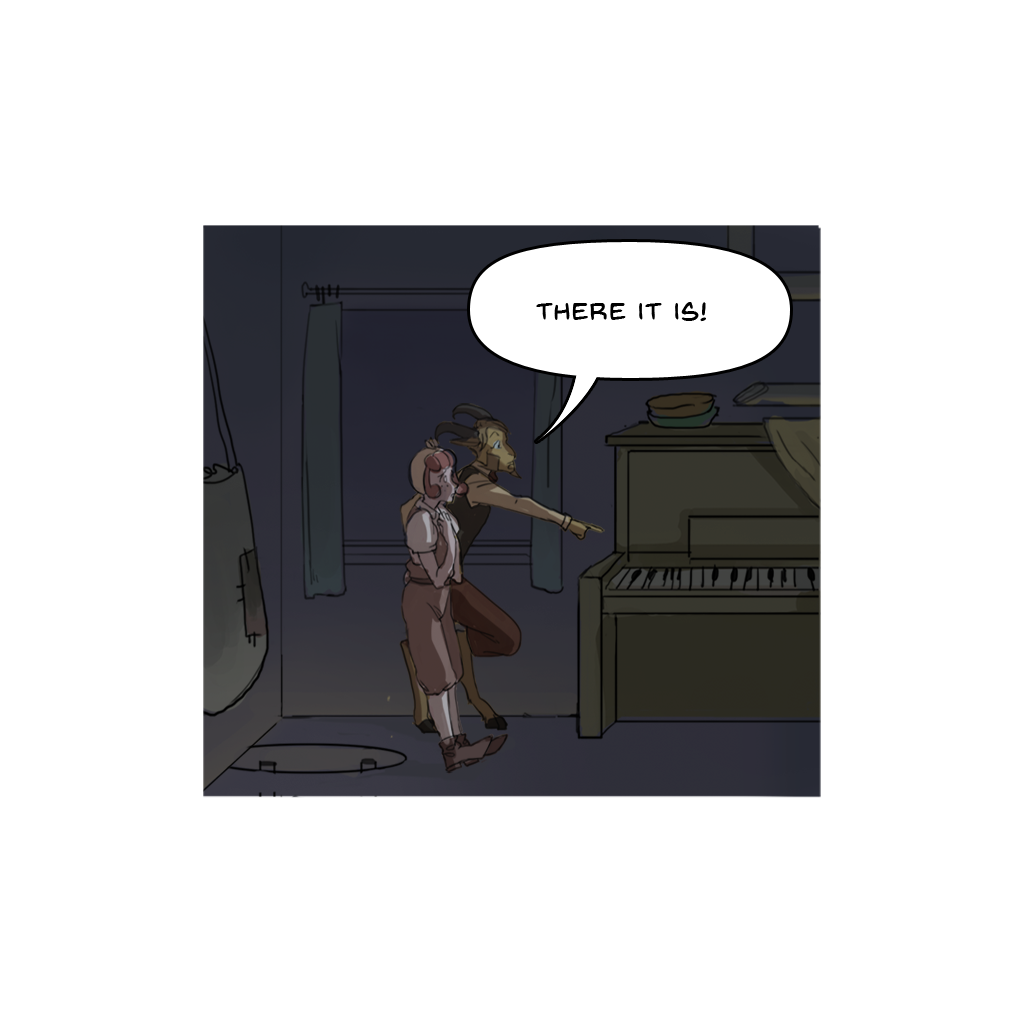
<style>
.page{position:relative;width:1024px;height:1024px;background:#ffffff}
.page>*{position:absolute;margin:0}
.t1{font:25px "BackIssuesBB";letter-spacing:0.05em;color:#000000}
</style>
<div class="page">
<p class="t1" style="left:536px;top:302px;width:170px;height:20px">There it is!</p>
</div>
